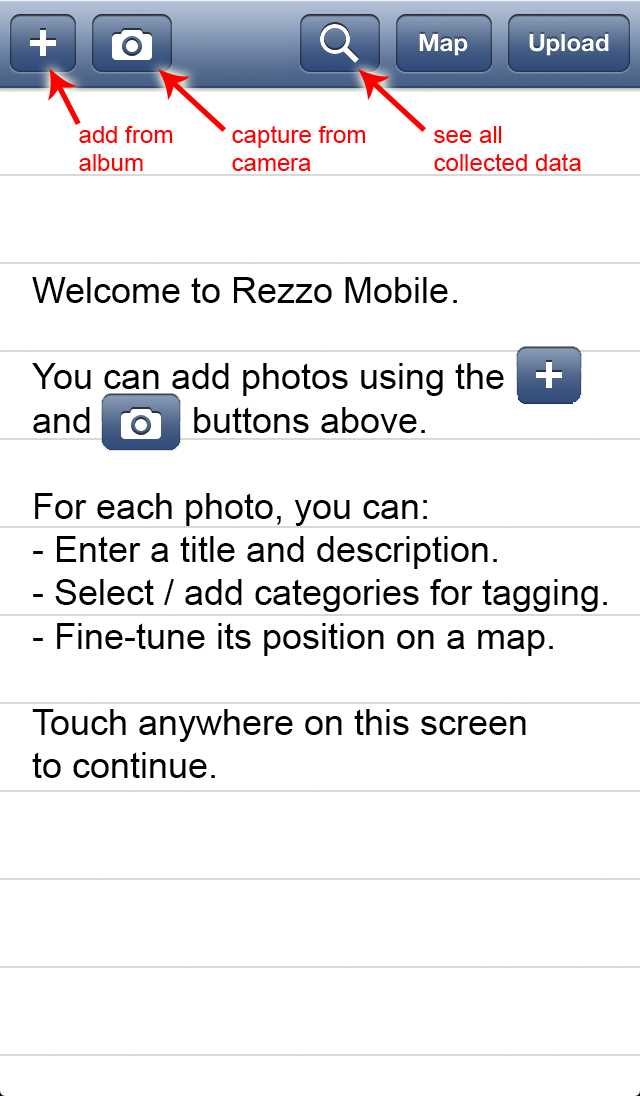
<style>
.page{position:relative;width:640px;height:1096px;background:#ffffff}
.page>*{position:absolute;margin:0}
.t1{font:24px "ArialMT";color:#ff0000}
.t2{font:36px "ArialMT";color:#000000}
</style>
<div class="page">
<p class="t1" style="left:79px;top:126px;width:94px;height:45px">add from<br>album</p>
<p class="t1" style="left:232px;top:125px;width:134px;height:46px">capture from<br>camera</p>
<p class="t1" style="left:434px;top:126px;width:147px;height:45px">see all<br>collected data</p>
<p class="t2" style="left:32px;top:277px;width:575px;height:501px">Welcome to Rezzo Mobile.<br><br>You can add photos using the<br>and          buttons above.<br><br>For each photo, you can:<br>- Enter a title and description.<br>- Select / add categories for tagging.<br>- Fine-tune its position on a map.<br><br>Touch anywhere on this screen<br>to continue.</p>
</div>
